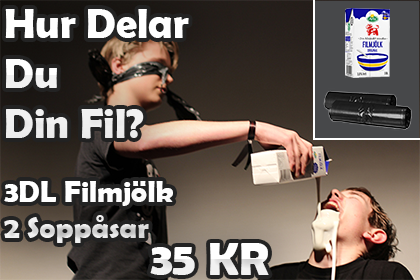
<style>
.page{position:relative;width:420px;height:280px}
.page>*{position:absolute;margin:0}
.t1{font:42px "BerlinSansFBDemi-Bold";color:#ffffff}
.t2{font:30px "BerlinSansFBDemi-Bold";color:#ffffff}
.t3{font:47px "BerlinSansFBDemi-Bold";color:#ffffff}
</style>
<div class="page">
<p class="t1" style="left:5px;top:9px;width:184px;height:130px">Hur Delar<br>Du <br>Din Fil?</p>
<p class="t1" style="left:5px;top:9px;width:184px;height:130px">Hur Delar<br>Du <br>Din Fil?</p>
<p class="t2" style="left:4px;top:181px;width:169px;height:62px">3DL Filmjölk<br>2 Soppåsar</p>
<p class="t2" style="left:4px;top:181px;width:169px;height:62px">3DL Filmjölk<br>2 Soppåsar</p>
<p class="t3" style="left:150px;top:243px;width:119px;height:32px">35 KR</p>
<p class="t3" style="left:150px;top:243px;width:119px;height:32px">35 KR</p>
</div>
